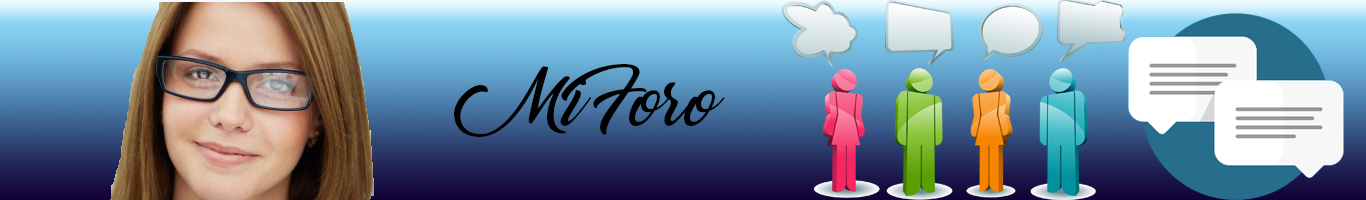
<style>
.page{position:relative;width:1366px;height:200px}
.page>*{position:absolute;margin:0}
.t1{font:60px "Marguerite";color:#000000}
</style>
<div class="page">
<p class="t1" style="left:454px;top:64px;width:271px;height:73px">Mi Foro</p>
</div>
